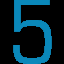
<style>
.page{position:relative;width:64px;height:64px;background:#000000}
.page>*{position:absolute;margin:0}
.t1{font:88px "MKSansTallX";color:#0a88ba}
</style>
<div class="page">
<p class="t1" style="left:13px;top:0px;width:39px;height:64px">5</p>
</div>
